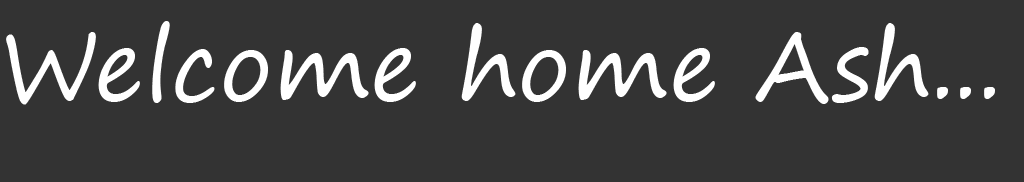
<style>
.page{position:relative;width:1024px;height:182px;background:#333333}
.page>*{position:absolute;margin:0}
.t1{font:95px "SegoePrint";color:#ffffff}
.t2{font:110px "SegoePrint";color:#ffffff}
</style>
<div class="page">
<p class="t1" style="left:6px;top:21px;width:989px;height:84px">Welcome home Ash... <span class="t2">AahAsh</span></p>
</div>
